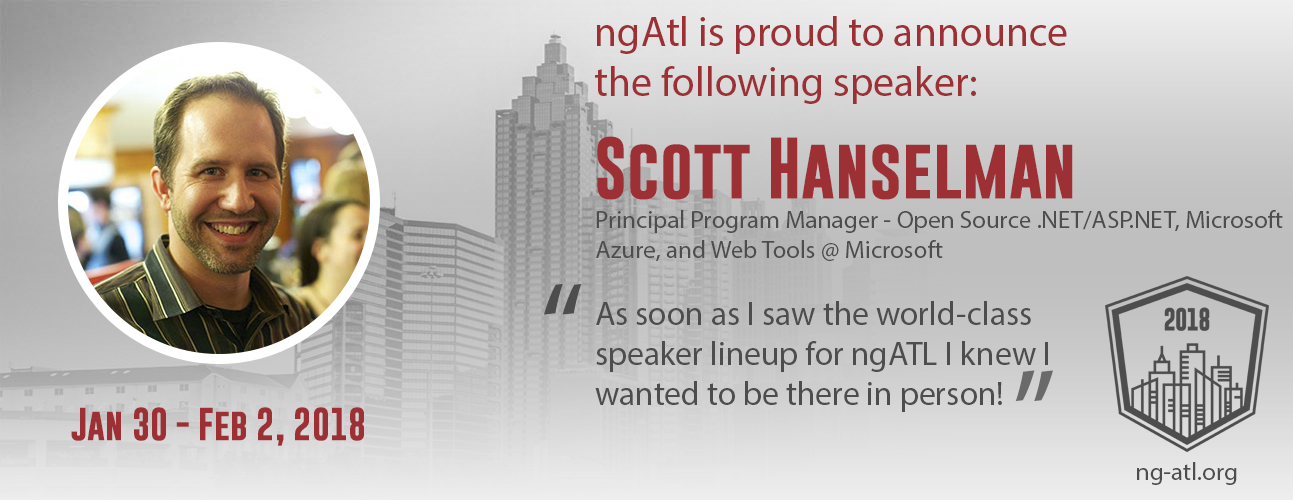
<style>
.page{position:relative;width:1293px;height:500px}
.page>*{position:absolute;margin:0}
.t1{font:41.7px "MyriadPro-Regular";color:#9d3035}
.t2{font:62.5px "GoboldBold";color:#9d3035}
.t3{font:25px "MyriadPro-Regular";color:#4d4d4e}
.t4{font:125px "MyriadPro-Regular";color:#4d4d4e}
.t5{font:33.3px "MyriadPro-Regular";color:#4d4d4e}
.t6{font:125px "MyriadPro-Regular";color:#6a6a6b}
.t7{font:33.3px "GoboldBold";color:#9d3035}
</style>
<div class="page">
<p class="t1" style="left:595px;top:16px;width:472px;height:88px">ngAtl is proud to announce the following speaker:</p>
<p class="t2" style="left:597px;top:136px;width:476px;height:64px">Scott Hanselman</p>
<p class="t3" style="left:596px;top:210px;width:687px;height:52px">Principal Program Manager - Open Source .NET/ASP.NET, Microsoft Azure, and Web Tools @ Microsoft</p>
<p class="t4" style="left:544px;top:283px;width:38px;height:32px">“</p>
<p class="t5" style="left:595px;top:301px;width:453px;height:111px">As soon as I saw the world-class speaker lineup for ngATL I knew I wanted to be there in person!</p>
<p class="t6" style="left:1015px;top:370px;width:38px;height:32px;rotate:180deg">“</p>
<p class="t7" style="left:71px;top:407px;width:293px;height:39px">Jan 30 - Feb 2, 2018</p>
<p class="t3" style="left:1137px;top:462px;width:100px;height:23px">ng-atl.org</p>
</div>
